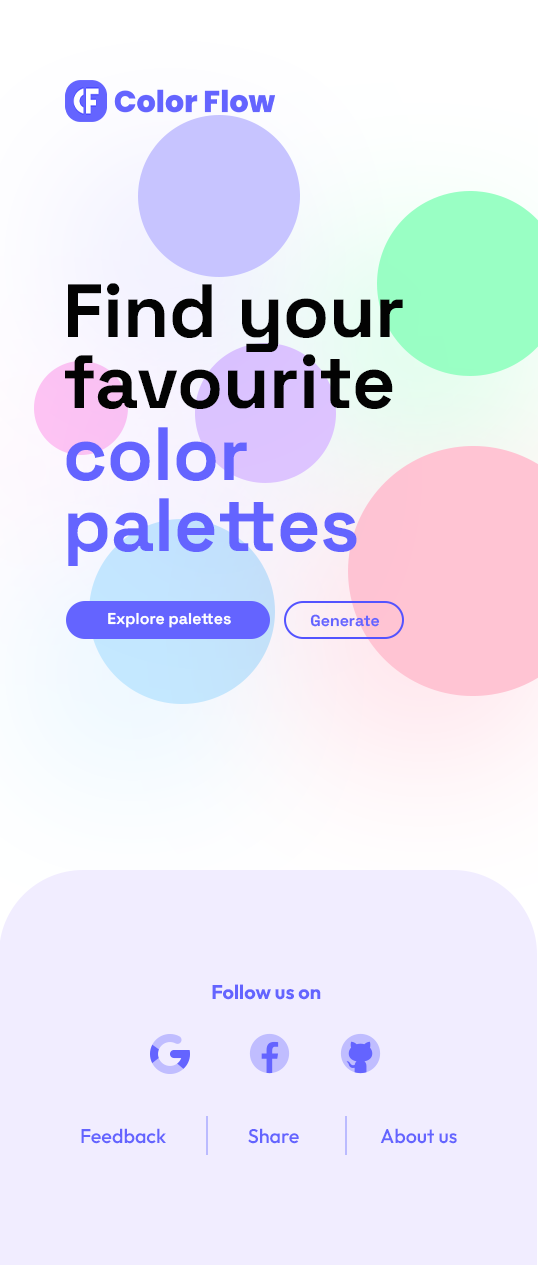
<style>
.page{position:relative;width:538px;height:1265px;background:#f1edff}
.page>*{position:absolute;margin:0}
.t1{font:75.4px/71.5px "SpaceGrotesk-Bold";color:#030303}
.t2{font:75.4px/71.5px "SpaceGrotesk-Bold";color:#6464ff}
.t3{font:15.9px "SpaceGrotesk-Bold";color:#ffffff}
.t4{font:15.9px "SpaceGrotesk-Bold";color:#6464ff}
.t5{font:19.8px "Outfit-Bold";color:#6464ff}
.t6{font:19.8px "Outfit-Medium";color:#6464ff}
</style>
<div class="page">
<p class="t1" style="left:65px;top:283px;width:338px;height:283px">Find your<br>favourite<br><span class="t2">color <br>palettes</span></p>
<p class="t3" style="left:108px;top:612px;width:123px;height:16px">Explore palettes</p>
<p class="t4" style="left:310px;top:614px;width:70px;height:13px">Generate</p>
<p class="t5" style="left:212px;top:984px;width:109px;height:16px">Follow us on</p>
<p class="t6" style="left:81px;top:1128px;width:85px;height:16px">Feedback</p>
<p class="t6" style="left:248px;top:1128px;width:51px;height:16px">Share</p>
<p class="t6" style="left:380px;top:1128px;width:77px;height:16px">About us</p>
</div>
